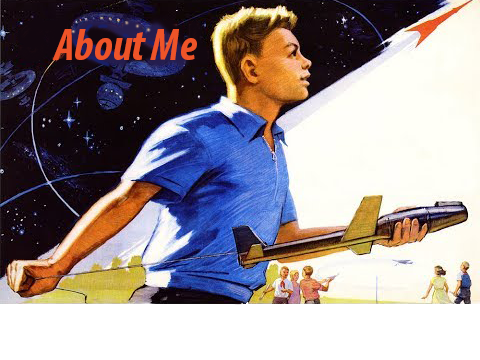
<style>
.page{position:relative;width:480px;height:360px}
.page>*{position:absolute;margin:0}
.t1{font:45px "MyriadPro-BoldCondIt";color:#ef5428}
</style>
<div class="page">
<p class="t1" style="left:52px;top:29px;width:145px;height:31px">About Me</p>
</div>
